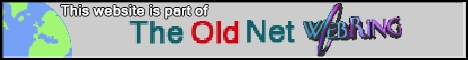
<style>
.page{position:relative;width:468px;height:60px;background:#cccccc}
.page>*{position:absolute;margin:0}
.t1{font:14.3px "MicrosoftSansSerif";color:#ffffff;font-weight:bold}
.t2{font:30.5px "MicrosoftSansSerif";color:#0f6068;font-weight:bold}
.t3{font:30.5px "MicrosoftSansSerif";color:#d20310;font-weight:bold}
</style>
<div class="page">
<p class="t1" style="left:60px;top:5px;width:148px;height:14px">This website is part of</p>
<p class="t2" style="left:128px;top:21px;width:56px;height:23px">The</p>
<p class="t3" style="left:191px;top:21px;width:49px;height:23px">Old</p>
<p class="t2" style="left:247px;top:20px;width:48px;height:23px">Net</p>
</div>
